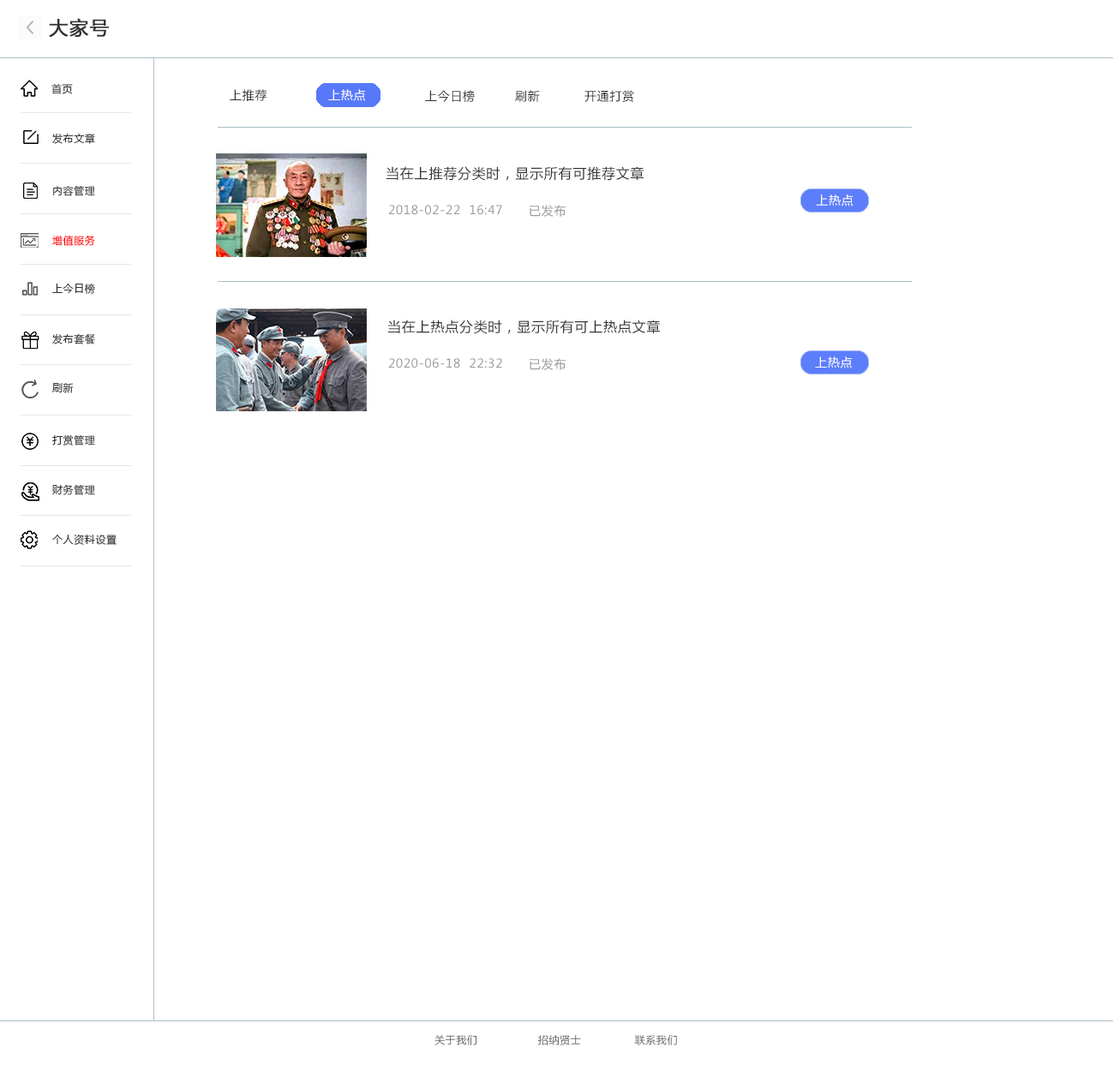
<style>
.page{position:relative;width:1114px;height:1071px;background:#ffffff}
.page>*{position:absolute;margin:0}
.t1{font:18.8px "MicrosoftYaHei";letter-spacing:0.05em;color:#333333;font-weight:bold}
.t2{font:10.3px "MicrosoftYaHei";letter-spacing:0.05em;color:#333333}
.t3{font:12px "MicrosoftYaHei";letter-spacing:0.05em;color:#333333}
.t4{font:12px "MicrosoftYaHei";letter-spacing:0.05em;color:#ffffff}
.t5{font:13.7px "MicrosoftYaHei";letter-spacing:0.05em;color:#333333}
.t6{font:12px "MicrosoftYaHei";letter-spacing:0.05em;color:#999999}
.t7{font:10.3px "MicrosoftYaHei";letter-spacing:0.05em;color:#ff0000}
.t8{font:10.3px "MicrosoftYaHei";letter-spacing:0.05em;color:#666666}
</style>
<div class="page">
<p class="t1" style="left:49px;top:18px;width:60px;height:20px">大家号</p>
<p class="t2" style="left:51px;top:83px;width:22px;height:11px">首页</p>
<p class="t3" style="left:230px;top:89px;width:36px;height:12px">上推荐</p>
<p class="t4" style="left:328px;top:89px;width:37px;height:12px">上热点</p>
<p class="t3" style="left:425px;top:90px;width:50px;height:12px">上今日榜</p>
<p class="t3" style="left:515px;top:90px;width:25px;height:12px">刷新</p>
<p class="t3" style="left:584px;top:90px;width:50px;height:12px">开通打赏</p>
<p class="t2" style="left:52px;top:133px;width:43px;height:11px">发布文章</p>
<p class="t5" style="left:385px;top:166px;width:259px;height:15px">当在上推荐分类时，显示所有可推荐文章</p>
<p class="t2" style="left:53px;top:185px;width:42px;height:11px">内容管理</p>
<p class="t4" style="left:816px;top:194px;width:37px;height:12px">上热点</p>
<p class="t6" style="left:388px;top:205px;width:114px;height:10px">2018-02-22  16:47</p>
<p class="t6" style="left:529px;top:205px;width:37px;height:12px">已发布</p>
<p class="t7" style="left:52px;top:235px;width:43px;height:11px">增值服务</p>
<p class="t2" style="left:52px;top:283px;width:43px;height:11px">上今日榜</p>
<p class="t5" style="left:387px;top:320px;width:273px;height:14px">当在上热点分类时，显示所有可上热点文章</p>
<p class="t2" style="left:52px;top:333px;width:43px;height:11px">发布套餐</p>
<p class="t6" style="left:388px;top:358px;width:114px;height:10px">2020-06-18  22:32</p>
<p class="t6" style="left:529px;top:358px;width:37px;height:12px">已发布</p>
<p class="t2" style="left:52px;top:383px;width:22px;height:10px">刷新</p>
<p class="t2" style="left:52px;top:434px;width:43px;height:11px">打赏管理</p>
<p class="t2" style="left:52px;top:484px;width:43px;height:11px">财务管理</p>
<p class="t2" style="left:52px;top:534px;width:65px;height:11px">个人资料设置</p>
<p class="t8" style="left:434px;top:1035px;width:243px;height:10px">关于我们                 招纳贤士               联系我们</p>
</div>
